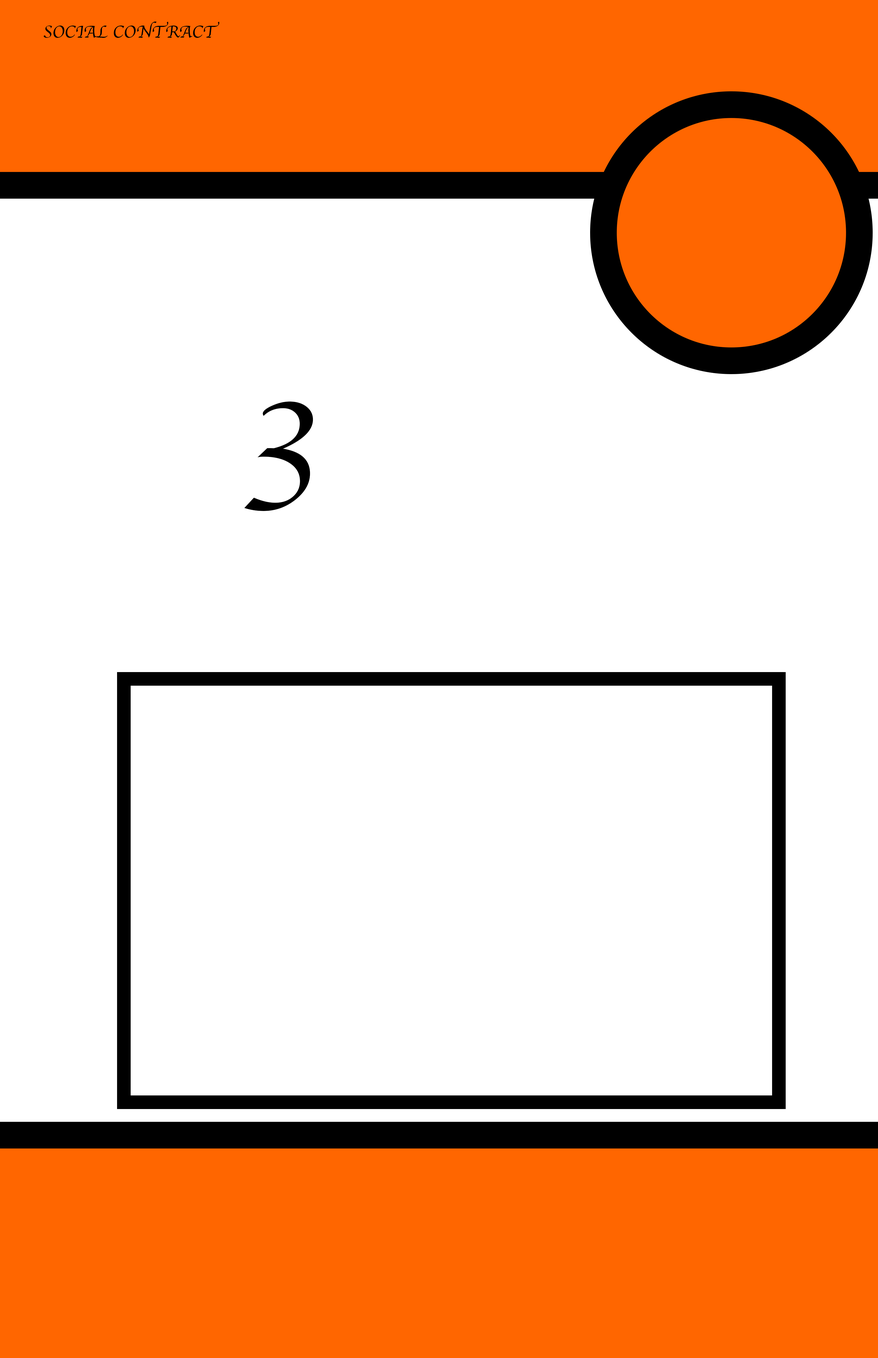
<style>
.page{position:relative;width:878px;height:1358px;background:#ffffff}
.page>*{position:absolute;margin:0}
.t1{font:17.7px "Apple-Chancery";color:#000000}
.t2{font:166.4px "Apple-Chancery";color:#000000}
</style>
<div class="page">
<p class="t1" style="left:43px;top:22px;width:177px;height:16px">SOCIAL CONTRACT</p>
<p class="t2" style="left:244px;top:401px;width:69px;height:110px">3</p>
</div>
